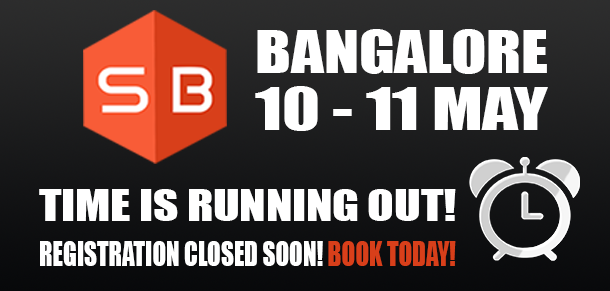
<style>
.page{position:relative;width:610px;height:291px}
.page>*{position:absolute;margin:0}
.t1{font:54.6px "Impact";color:#ffffff;scale:1.18 1}
.t2{font:54.6px "Impact";color:#ffffff;scale:1.29 1}
.t3{font:40.8px "Impact";color:#ffffff;scale:1.19 1}
.t4{font:31.8px "Impact";color:#ffffff;scale:0.79 1}
.t5{font:31.8px "Impact";color:#d83f1a;scale:0.79 1}
</style>
<div class="page">
<p class="t1" style="left:257px;top:29px;width:290px;height:45px">BANGALORE</p>
<p class="t2" style="left:255px;top:86px;width:293px;height:45px">10 - 11 MAY</p>
<p class="t3" style="left:39px;top:189px;width:417px;height:32px">TIME IS RUNNING OUT!</p>
<p class="t4" style="left:40px;top:241px;width:416px;height:25px">REGISTRATION CLOSED SOON! <span class="t5">BOOK TODAY!</span></p>
</div>
